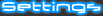
<style>
.page{position:relative;width:103px;height:16px;background:#0096ff}
.page>*{position:absolute;margin:0}
.t1{font:16px "ThundergodII";color:#ffffff}
</style>
<div class="page">
<p class="t1" style="left:2px;top:2px;width:99px;height:12px">Settings</p>
</div>
